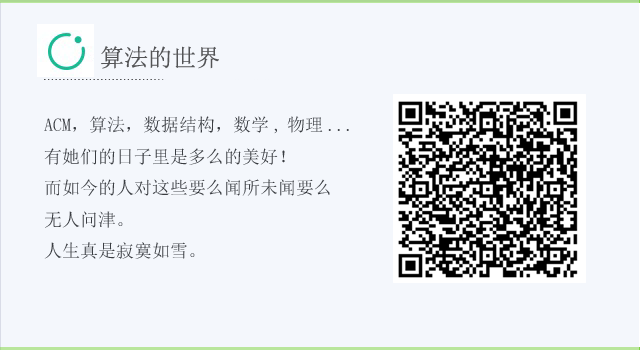
<style>
.page{position:relative;width:640px;height:350px;background:#f4f7fc}
.page>*{position:absolute;margin:0}
.t1{font:24px "NSimSun";color:#535456}
.t2{font:18px "NSimSun";color:#3a3d42}
</style>
<div class="page">
<p class="t1" style="left:101px;top:46px;width:118px;height:23px">算法的世界</p>
<p class="t2" style="left:44px;top:116px;width:305px;height:143px">ACM，算法，数据结构，数学,物理...<br>有她们的日子里是多么的美好！<br>而如今的人对这些要么闻所未闻要么<br>无人问津。<br>人生真是寂寞如雪。</p>
</div>
